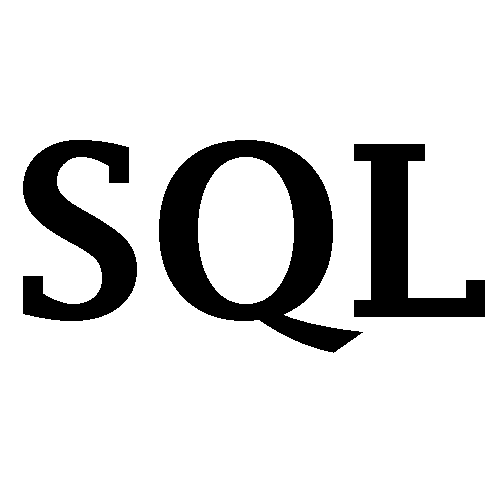
<style>
.page{position:relative;width:500px;height:500px;background:#ffffff}
.page>*{position:absolute;margin:0}
.t1{font:240px "LucidaFax-Demi";color:#000000}
</style>
<div class="page">
<p class="t1" style="left:23px;top:140px;width:462px;height:213px">SQL</p>
</div>
